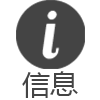
<style>
.page{position:relative;width:100px;height:100px;background:#ffffff}
.page>*{position:absolute;margin:0}
.t1{font:27.8px "MicrosoftYaHei";color:#444444}
</style>
<div class="page">
<p class="t1" style="left:22px;top:71px;width:56px;height:27px">信息</p>
</div>
